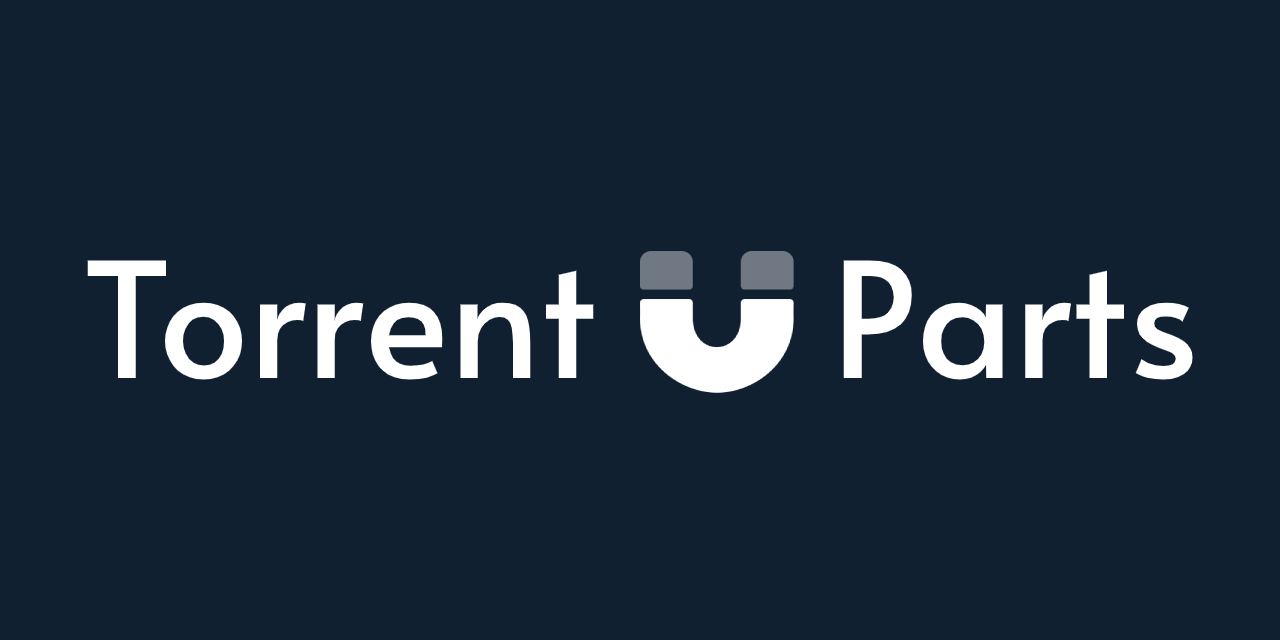
<style>
.page{position:relative;width:1280px;height:640px;background:#102030}
.page>*{position:absolute;margin:0}
.t1{font:160px "Alata-Regular";color:#ffffff}
</style>
<div class="page">
<p class="t1" style="left:87px;top:260px;width:1106px;height:120px">Torrent      Parts</p>
</div>
